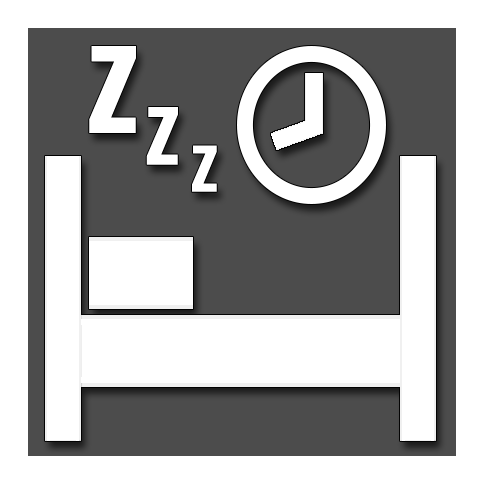
<style>
.page{position:relative;width:484px;height:484px;background:#ffffff}
.page>*{position:absolute;margin:0}
.t1{font:150px "Oswald-Medium";color:#ffffff}
.t2{font:100px "Oswald-Medium";color:#ffffff}
.t3{font:80px "Oswald-Medium";color:#ffffff}
</style>
<div class="page">
<p class="t1" style="left:89px;top:46px;width:47px;height:87px">z</p>
<p class="t2" style="left:146px;top:107px;width:32px;height:58px">z</p>
<p class="t3" style="left:192px;top:145px;width:25px;height:47px">z</p>
</div>
